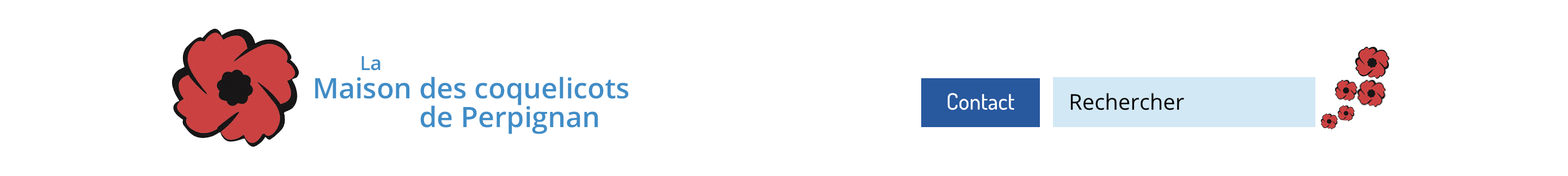
<style>
.page{position:relative;width:1568px;height:176px;background:#ffffff}
.page>*{position:absolute;margin:0}
.t1{font:19.6px "OpenSans-SemiBold";color:#408dc7}
.t2{font:28.3px "OpenSans-SemiBold";color:#408dc7}
</style>
<div class="page">
<p class="t1" style="left:362px;top:56px;width:19px;height:15px">La</p>
<p class="t2" style="left:315px;top:77px;width:313px;height:29px">Maison des coquelicots</p>
<p class="t2" style="left:420px;top:106px;width:178px;height:28px">de Perpignan</p>
</div>
